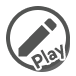
<style>
.page{position:relative;width:76px;height:76px;background:#ffffff}
.page>*{position:absolute;margin:0}
.t1{font:18.8px "MikadoMedium";color:#535453}
</style>
<div class="page">
<p class="t1" style="left:31px;top:44px;width:33px;height:25px;rotate:-30deg">Play</p>
</div>
